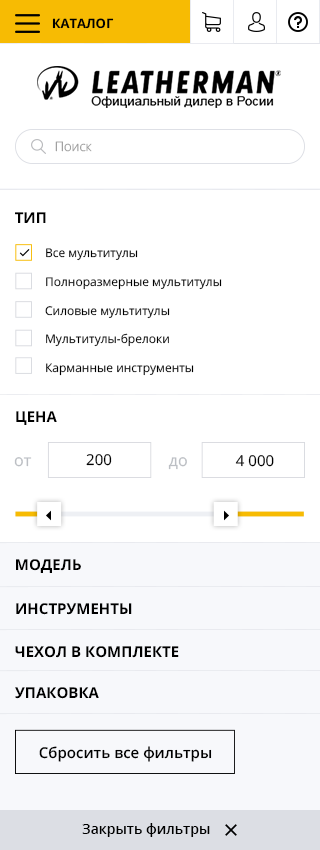
<style>
.page{position:relative;width:320px;height:850px;background:#ffffff}
.page>*{position:absolute;margin:0}
.t1{font:13px "OpenSans-Bold";color:#000000;text-transform:uppercase}
.t2{font:13px "OpenSans-Light";color:#a1a1a1}
.t3{font:15px "OpenSans-Bold";color:#000000;text-transform:uppercase}
.t4{font:12px "OpenSans";color:#000000}
.t5{font:16px "OpenSans";color:#bcbfc4}
.t6{font:15px "OpenSans";color:#000000}
.t7{font:15px "OpenSans-Semibold";color:#000000}
.t8{font:14px "OpenSans-Semibold";color:#000000}
</style>
<div class="page">
<p class="t1" style="left:52px;top:18px;width:62px;height:11px">Каталог</p>
<p class="t2" style="left:55px;top:141px;width:37px;height:11px">Поиск</p>
<p class="t3" style="left:15px;top:212px;width:31px;height:11px">Тип</p>
<p class="t4" style="left:45px;top:248px;width:177px;height:128px">Все мультитулы<br><br>Полноразмерные мультитулы<br><br>Силовые мультитулы<br><br>Мультитулы-брелоки<br><br>Карманные инструменты</p>
<p class="t3" style="left:16px;top:411px;width:41px;height:14px">Цена</p>
<p class="t5" style="left:14px;top:457px;width:18px;height:10px">от</p>
<p class="t6" style="left:86px;top:454px;width:26px;height:12px">200</p>
<p class="t5" style="left:168px;top:457px;width:19px;height:13px">до</p>
<p class="t6" style="left:235px;top:455px;width:39px;height:12px">4 000</p>
<p class="t3" style="left:16px;top:559px;width:65px;height:14px">Модель</p>
<p class="t3" style="left:16px;top:603px;width:116px;height:12px">Инструменты</p>
<p class="t3" style="left:15px;top:646px;width:164px;height:12px">Чехол в комплекте</p>
<p class="t3" style="left:15px;top:687px;width:84px;height:12px">Упаковка</p>
<p class="t7" style="left:39px;top:746px;width:173px;height:16px">Сбросить все фильтры</p>
<p class="t8" style="left:82px;top:823px;width:128px;height:14px">Закрыть фильтры</p>
</div>
